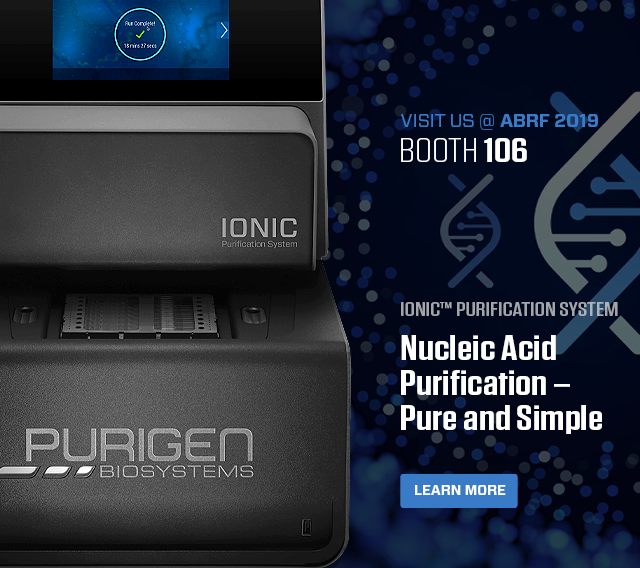
<style>
.page{position:relative;width:640px;height:568px}
.page>*{position:absolute;margin:0}
.t1{font:18.5px "Forza-Book";letter-spacing:-0.01em;color:#3a7bc8;text-transform:uppercase}
.t2{font:18.5px "Forza-Bold";letter-spacing:-0.01em;color:#3a7bc8;text-transform:uppercase}
.t3{font:34px "Tungsten-Light";color:#ffffff;text-transform:uppercase;scale:1.35 1}
.t4{font:34px "Tungsten-Semibold";color:#ffffff;scale:1.35 1}
.t5{font:20px "Tungsten-Medium";color:#a4a5a8;text-transform:uppercase;scale:1.42 1}
.t6{font:35px/35px "Tungsten-Semibold";color:#ffffff;scale:1.31 1}
.t7{font:14px "Forza-Bold";letter-spacing:-0.01em;color:#ffffff;text-transform:uppercase}
</style>
<div class="page">
<p class="t1" style="left:401px;top:114px;width:197px;height:16px">Visit us @<span class="t2"> ABRF 2019</span></p>
<p class="t3" style="left:401px;top:138px;width:126px;height:24px">Booth<span class="t4"> 106</span></p>
<p class="t5" style="left:401px;top:302px;width:217px;height:14px">Ionic™ Purification System</p>
<p class="t6" style="left:401px;top:335px;width:201px;height:99px">Nucleic Acid<br>Purification –<br>Pure and Simple</p>
<p class="t7" style="left:415px;top:485px;width:91px;height:10px">Learn MOre</p>
</div>
